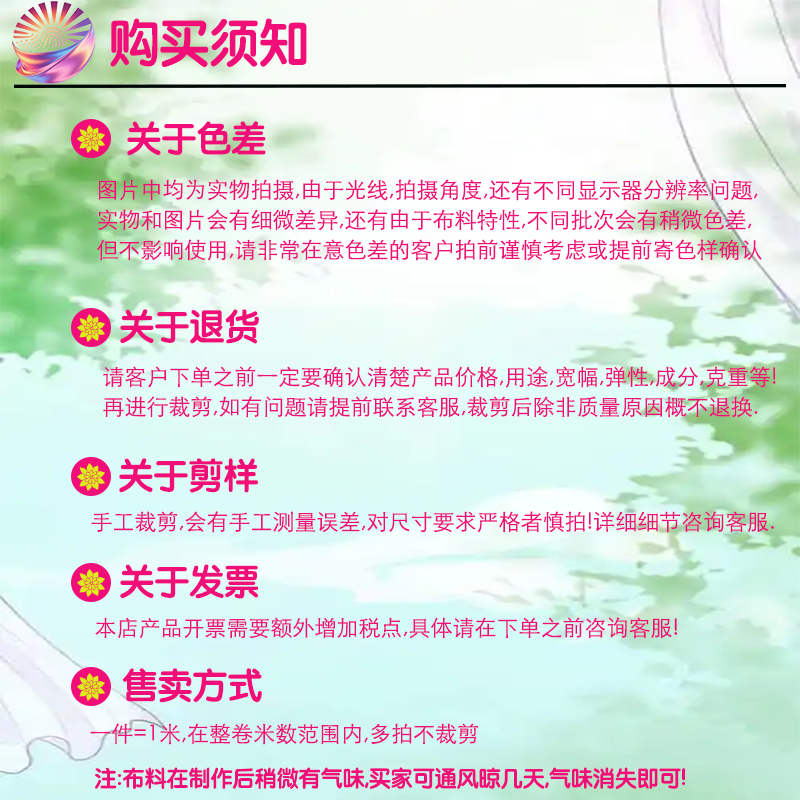
<style>
.page{position:relative;width:800px;height:800px}
.page>*{position:absolute;margin:0}
.t1{font:50px "STYuanti-SC-Bold";color:#f20e79}
.t2{font:35px "STYuanti-SC-Bold";color:#f20e79}
.t3{font:22px/30px "STXihei";color:#f20e79}
.t4{font:22px "STXihei";color:#f20e79}
.t5{font:22px "STYuanti-SC-Bold";color:#f20e79}
</style>
<div class="page">
<p class="t1" style="left:110px;top:18px;width:197px;height:50px">购买须知</p>
<p class="t2" style="left:127px;top:121px;width:139px;height:35px">关于色差</p>
<p class="t3" style="left:97px;top:179px;width:665px;height:82px">图片中均为实物拍摄,由于光线,拍摄角度,还有不同显示器分辨率问题,<br>实物和图片会有细微差异,还有由于布料特性,不同批次会有稍微色差,<br>但不影响使用,请非常在意色差的客户拍前谨慎考虑或提前寄色样确认</p>
<p class="t2" style="left:120px;top:309px;width:139px;height:35px">关于退货</p>
<p class="t3" style="left:103px;top:366px;width:673px;height:52px">请客户下单之前一定要确认清楚产品价格,用途,宽幅,弹性,成分,克重等!<br>再进行裁剪,如有问题请提前联系客服,裁剪后除非质量原因概不退换.</p>
<p class="t2" style="left:119px;top:458px;width:139px;height:35px">关于剪样</p>
<p class="t4" style="left:91px;top:511px;width:683px;height:22px">手工裁剪,会有手工测量误差,对尺寸要求严格者慎拍!详细细节咨询客服.</p>
<p class="t2" style="left:120px;top:564px;width:139px;height:35px">关于发票</p>
<p class="t4" style="left:95px;top:617px;width:583px;height:22px">本店产品开票需要额外增加税点,具体请在下单之前咨询客服!</p>
<p class="t2" style="left:122px;top:668px;width:140px;height:35px">售卖方式</p>
<p class="t4" style="left:90px;top:723px;width:388px;height:22px">一件=1米,在整卷米数范围内,多拍不裁剪</p>
<p class="t5" style="left:95px;top:767px;width:591px;height:22px">注:布料在制作后稍微有气味,买家可通风晾几天,气味消失即可!</p>
</div>
